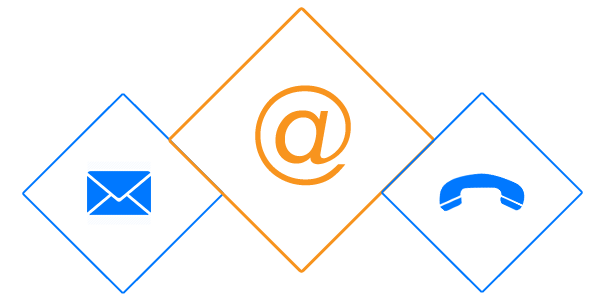
<style>
.page{position:relative;width:606px;height:300px;background:#ffffff}
.page>*{position:absolute;margin:0}
.t1{font:130.1px "CenturyGothic-Italic";color:#f8941e}
</style>
<div class="page">
<p class="t1" style="left:255px;top:85px;width:96px;height:101px">@</p>
</div>
